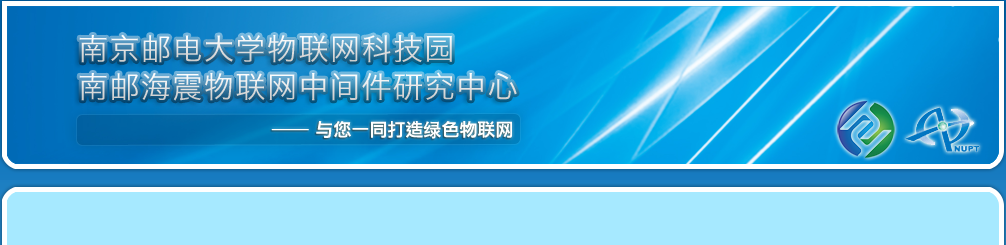
<style>
.page{position:relative;width:1006px;height:245px;background:#a6e9ff}
.page>*{position:absolute;margin:0}
.t1{font:30px "HiraginoSansGB-W3";letter-spacing:0.05em;color:#e9e9e9}
.t2{font:30px "HiraginoSansGB-W3";letter-spacing:0.05em;color:#e7e7e7}
.t3{font:18px "LiHeiPro";color:#ffffff}
.t4{font:18px "LiHeiPro";color:#ffffff;font-weight:bold}
.t5{font:18px "SIL-Hei-Med-Jian";color:#ffffff}
</style>
<div class="page">
<p class="t1" style="left:79px;top:34px;width:373px;height:29px">南京邮电大学物联网科技园</p>
<p class="t2" style="left:79px;top:72px;width:438px;height:29px">南邮海震物联网中间件研究中心</p>
<p class="t3" style="left:271px;top:121px;width:241px;height:18px"><span class="t4">── </span>与您一同打造<span class="t5">绿</span>色物联网</p>
</div>
